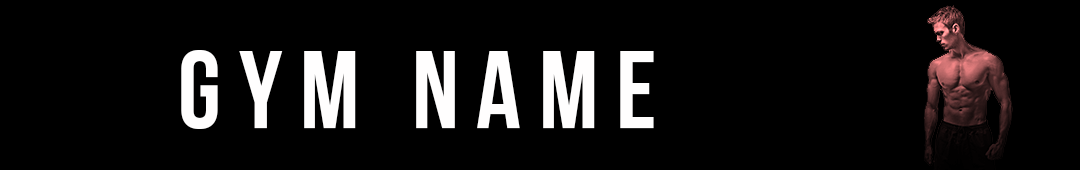
<style>
.page{position:relative;width:1080px;height:170px;background:#000000}
.page>*{position:absolute;margin:0}
.t1{font:110px "BebasNeueCyrillic";letter-spacing:0.16em;color:#fffefe}
</style>
<div class="page">
<p class="t1" style="left:181px;top:50px;width:473px;height:79px">GYM NAME</p>
</div>
